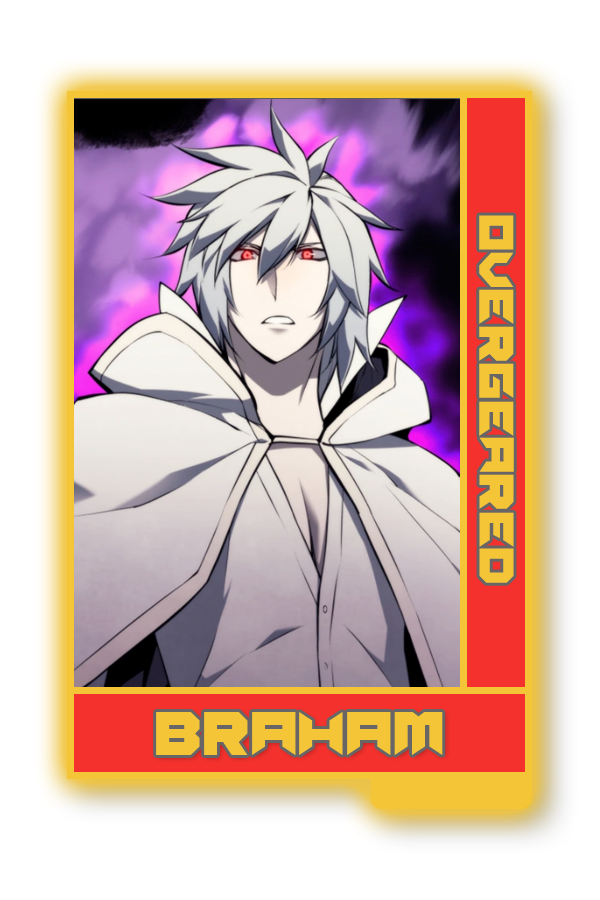
<style>
.page{position:relative;width:600px;height:900px;background:#ffffff}
.page>*{position:absolute;margin:0}
.t1{font:48.8px "Suggested-Regular";color:#f4c536}
.t2{font:62.5px "Suggested-Regular";color:#f4c536}
</style>
<div class="page">
<p class="t1" style="left:479px;top:215px;width:35px;height:368px;rotate:90deg">OVERGEARED</p>
<p class="t2" style="left:156px;top:712px;width:287px;height:43px">BRAHAM</p>
</div>
